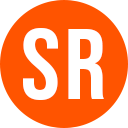
<style>
.page{position:relative;width:128px;height:128px;background:#ff5400}
.page>*{position:absolute;margin:0}
.t1{font:100px "BebasNeue-Regular";letter-spacing:0.04em;color:#ffffff;scale:1.05 1}
</style>
<div class="page">
<p class="t1" style="left:23px;top:28px;width:81px;height:72px">SR</p>
</div>
